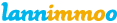
<style>
.page{position:relative;width:117px;height:23px;background:#ffffff}
.page>*{position:absolute;margin:0}
.t1{font:29px "BlackRose";color:#00b5ec}
.t2{font:29px "BlackRose";color:#f2ac04}
</style>
<div class="page">
<p class="t1" style="left:1px;top:2px;width:116px;height:19px">lann<span class="t2">immo</span>o</p>
</div>
